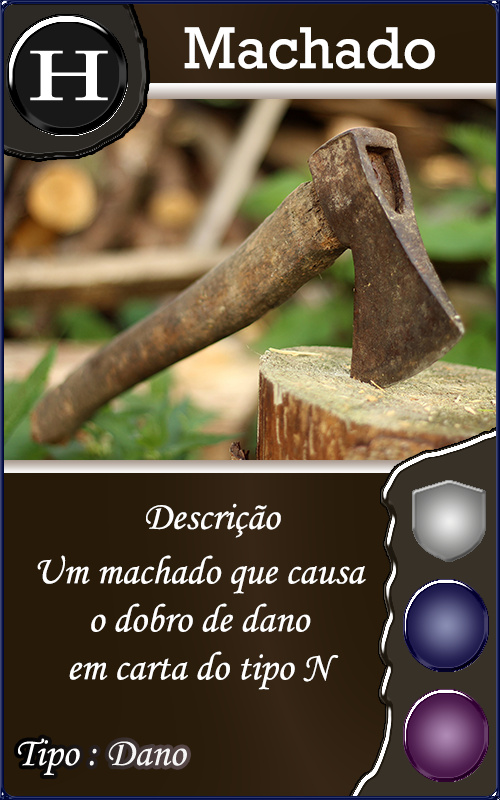
<style>
.page{position:relative;width:500px;height:800px}
.page>*{position:absolute;margin:0}
.t1{font:60px "Rockwell";color:#ffffff}
.t2{font:40px "MonotypeCorsiva";color:#fffefe}
.t3{font:40px "MonotypeCorsiva";color:#ffffff}
</style>
<div class="page">
<p class="t1" style="left:184px;top:27px;width:251px;height:43px">Machado</p>
<p class="t2" style="left:146px;top:503px;width:135px;height:35px">Descrição</p>
<p class="t3" style="left:37px;top:555px;width:329px;height:135px;text-align:center">Um machado que causa<br> o dobro de dano <br>em carta do tipo N</p>
</div>
